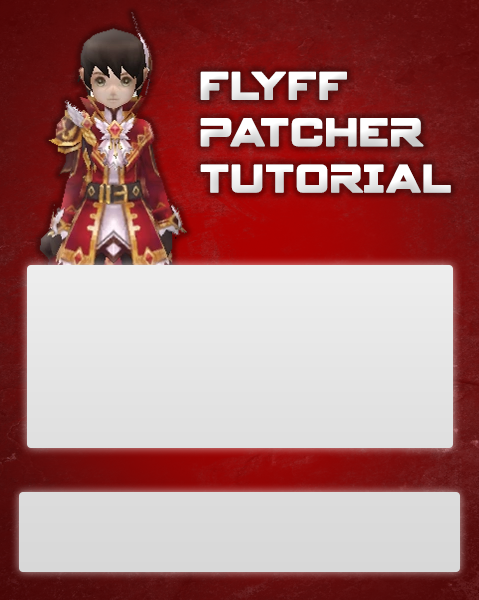
<style>
.page{position:relative;width:479px;height:600px}
.page>*{position:absolute;margin:0}
.t1{font:43.1px/46.3px "SpyAgency";color:#ffffff;font-weight:bold;scale:0.93 1}
</style>
<div class="page">
<p class="t1" style="left:200px;top:71px;width:251px;height:122px">FLYFF<br>PATCHER<br>TUTORIAL</p>
</div>
